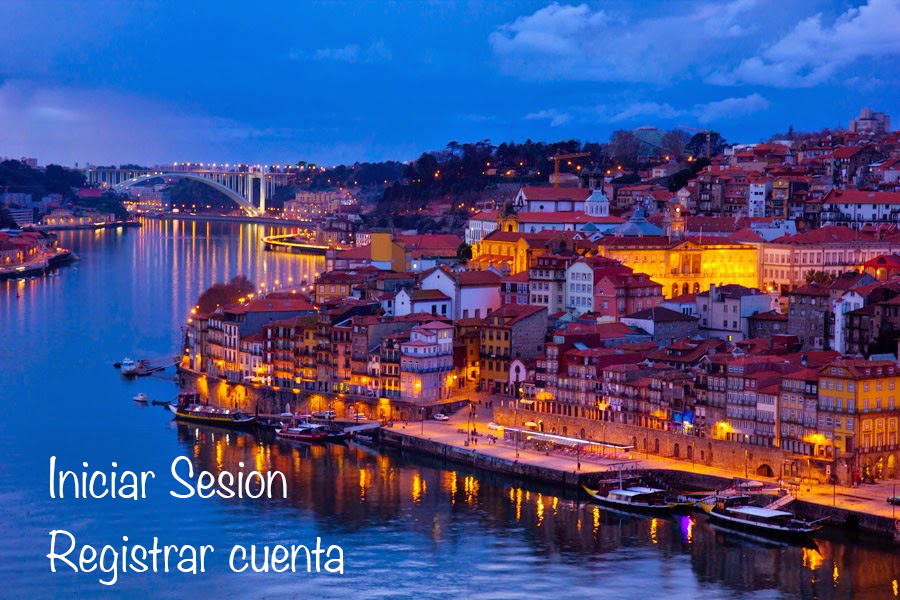
<style>
.page{position:relative;width:900px;height:600px}
.page>*{position:absolute;margin:0}
.t1{font:48px "Noteworthy-Light";color:#ffffff}
</style>
<div class="page">
<p class="t1" style="left:50px;top:456px;width:237px;height:44px">Iniciar Sesion</p>
<p class="t1" style="left:46px;top:530px;width:298px;height:55px">Registrar cuenta</p>
</div>
